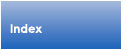
<style>
.page{position:relative;width:127px;height:50px}
.page>*{position:absolute;margin:0}
.t1{font:11.7px "CenturyGothic-Bold";color:#ffffff}
</style>
<div class="page">
<p class="t1" style="left:10px;top:24px;width:32px;height:9px">Index</p>
</div>
